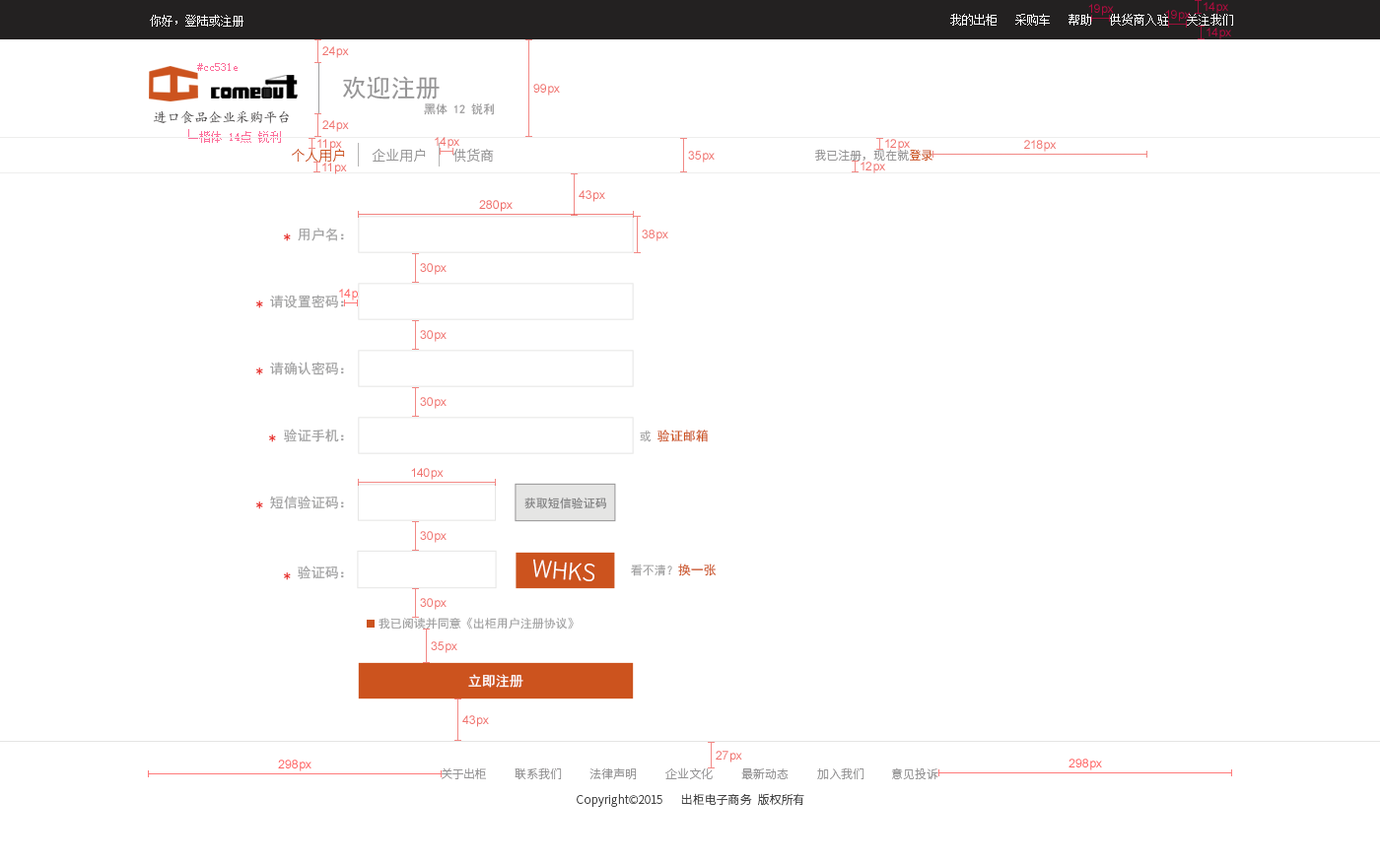
<style>
.page{position:relative;width:1380px;height:864px;background:#ffffff}
.page>*{position:absolute;margin:0}
.t1{font:11.8px "SimSun";color:#ffffff}
.t2{font:11.8px "SimSun";color:#fc6f9a}
.t3{font:24.6px "SimHei";color:#959495}
.t4{font:13.8px "¿¬Ìå";color:#464343}
.t5{font:11.8px "SimHei";color:#959495}
.t6{font:13.8px "SourceHanSansCN-Light";color:#cc531e}
.t7{font:13.8px "SourceHanSansCN-Light";color:#959495}
.t8{font:11.8px "SourceHanSansCN-Light";color:#959495}
.t9{font:11.8px "SourceHanSansCN-Light";color:#cc531e}
.t10{font:13.8px "SimHei";color:#e71f19}
.t11{font:13.8px "SimHei";color:#9f9fa0}
.t12{font:11.8px "SimHei";color:#9f9fa0}
.t13{font:12.8px "SimHei";color:#cc531e}
.t14{font:11.8px "SimHei";color:#7c7c7d}
.t15{font:23.2px "SourceHanSansCN-Light";color:#ffffff}
.t16{font:13.8px "SimHei";color:#ffffff}
.t17{font:11.8px "SourceHanSansCN-Light";color:#434343}
</style>
<div class="page">
<p class="t1" style="left:150px;top:15px;width:93px;height:12px">你好，登陆或注册</p>
<p class="t1" style="left:950px;top:14px;width:283px;height:12px">我的出柜   采购车   帮助   供货商入驻   关注我们</p>
<p class="t2" style="left:197px;top:63px;width:41px;height:8px">#cc531e</p>
<p class="t3" style="left:343px;top:76px;width:97px;height:24px">欢迎注册</p>
<p class="t4" style="left:153px;top:110px;width:136px;height:14px">进口食品企业采购平台</p>
<p class="t5" style="left:424px;top:103px;width:70px;height:12px">黑体 12 锐利</p>
<p class="t6" style="left:292px;top:149px;width:53px;height:14px">个人用户</p>
<p class="t7" style="left:372px;top:149px;width:54px;height:14px">企业用户</p>
<p class="t7" style="left:452px;top:148px;width:42px;height:15px">供货商</p>
<p class="t8" style="left:815px;top:149px;width:117px;height:12px">我已注册，现在就<span class="t9">登录</span></p>
<p class="t10" style="left:284px;top:234px;width:7px;height:7px">*</p>
<p class="t11" style="left:298px;top:228px;width:46px;height:13px">用户名：</p>
<p class="t10" style="left:256px;top:301px;width:7px;height:7px">*</p>
<p class="t11" style="left:270px;top:295px;width:74px;height:13px">请设置密码：</p>
<p class="t11" style="left:270px;top:362px;width:74px;height:13px">请确认密码：</p>
<p class="t10" style="left:256px;top:368px;width:7px;height:7px">*</p>
<p class="t10" style="left:269px;top:435px;width:7px;height:7px">*</p>
<p class="t11" style="left:284px;top:429px;width:60px;height:13px">验证手机：</p>
<p class="t12" style="left:640px;top:431px;width:11px;height:11px">或</p>
<p class="t13" style="left:657px;top:430px;width:52px;height:12px">验证邮箱</p>
<p class="t11" style="left:270px;top:496px;width:74px;height:13px">短信验证码：</p>
<p class="t14" style="left:524px;top:498px;width:83px;height:11px">获取短信验证码</p>
<p class="t10" style="left:256px;top:502px;width:7px;height:7px">*</p>
<p class="t11" style="left:298px;top:566px;width:46px;height:13px">验证码：</p>
<p class="t15" style="left:533px;top:559px;width:62px;height:22px;rotate:5deg">WHKS</p>
<p class="t12" style="left:631px;top:565px;width:41px;height:12px">看不清？</p>
<p class="t13" style="left:678px;top:564px;width:38px;height:13px">换一张</p>
<p class="t10" style="left:284px;top:573px;width:7px;height:7px">*</p>
<p class="t12" style="left:378px;top:617px;width:196px;height:13px">我已阅读并同意《出柜用户注册协议》</p>
<p class="t16" style="left:468px;top:674px;width:55px;height:14px">立即注册</p>
<p class="t8" style="left:442px;top:768px;width:44px;height:12px">关于出柜</p>
<p class="t8" style="left:514px;top:768px;width:48px;height:12px">联系我们</p>
<p class="t8" style="left:589px;top:768px;width:48px;height:12px">法律声明</p>
<p class="t8" style="left:665px;top:768px;width:48px;height:12px">企业文化</p>
<p class="t8" style="left:741px;top:769px;width:47px;height:12px">最新动态</p>
<p class="t8" style="left:817px;top:768px;width:47px;height:12px">加入我们</p>
<p class="t8" style="left:891px;top:768px;width:47px;height:13px">意见投诉</p>
<p class="t17" style="left:577px;top:794px;width:85px;height:13px">Copyright©2015</p>
<p class="t17" style="left:681px;top:793px;width:71px;height:12px">出柜电子商务</p>
<p class="t17" style="left:758px;top:793px;width:46px;height:13px">版权所有</p>
</div>
